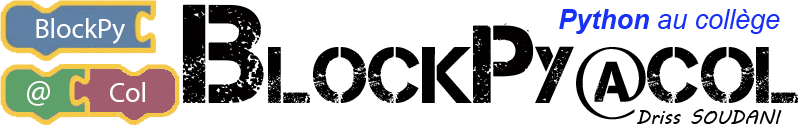
<style>
.page{position:relative;width:800px;height:126px;background:#ffffff}
.page>*{position:absolute;margin:0}
.t1{font:80px "Captureit";color:#020000}
.t2{font:140px "Captureit";color:#020000}
.t3{font:110px "Captureit";color:#020000}
.t4{font:27px "Arial-ItalicMT";color:#1731f6}
.t5{font:27px "Arial-BoldItalicMT";color:#1731f6}
.t6{font:28px "MyriadPro-Regular";color:#ffffff}
.t7{font:36px "MyriadPro-Regular";color:#fefefe}
.t8{font:28px "MyriadPro-Regular";color:#fefefe}
.t9{font:20px "MVBoli";color:#000000}
</style>
<div class="page">
<p class="t1" style="left:182px;top:4px;width:616px;height:116px"><span class="t2">B</span>lock<span class="t3">P</span>y@Col</p>
<p class="t4" style="left:559px;top:9px;width:221px;height:25px"><span class="t5">Python </span>au collège</p>
<p class="t6" style="left:36px;top:18px;width:89px;height:26px">BlockPy</p>
<p class="t7" style="left:27px;top:81px;width:23px;height:25px">@</p>
<p class="t8" style="left:110px;top:82px;width:35px;height:20px">Col</p>
<p class="t9" style="left:637px;top:109px;width:145px;height:15px">Driss SOUDANI</p>
</div>
